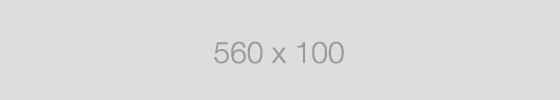
<style>
.page{position:relative;width:560px;height:100px;background:#dddddd}
.page>*{position:absolute;margin:0}
.t1{font:30px "HelveticaNeue-Light";color:#999999}
</style>
<div class="page">
<p class="t1" style="left:214px;top:41px;width:130px;height:23px">560 x 100</p>
</div>
